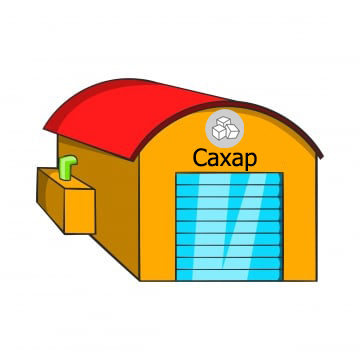
<style>
.page{position:relative;width:360px;height:360px;background:#ffffff}
.page>*{position:absolute;margin:0}
.t1{font:24px "Tahoma";color:#000000}
</style>
<div class="page">
<p class="t1" style="left:193px;top:148px;width:64px;height:23px">Сахар</p>
</div>
